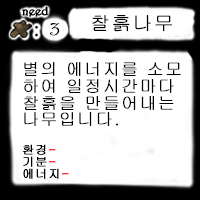
<style>
.page{position:relative;width:200px;height:200px;background:#ffffff}
.page>*{position:absolute;margin:0}
.t1{font:19.4px "Gulim";letter-spacing:0.08em;color:#000000;font-weight:bold}
.t2{font:19.4px "Gulim";letter-spacing:0.08em;color:#060606;font-weight:bold}
.t3{font:19.4px "Harrington";letter-spacing:0.08em;color:#030404;font-weight:bold}
.t4{font:16.8px "Gulim";letter-spacing:0.08em;color:#030404;font-weight:bold}
.t5{font:12px "Gulim";letter-spacing:0.08em;color:#030404;font-weight:bold}
.t6{font:12px "Gulim";letter-spacing:0.08em;color:#ff0000;font-weight:bold}
</style>
<div class="page">
<p class="t1" style="left:92px;top:15px;width:80px;height:17px">찰흙나무</p>
<p class="t2" style="left:35px;top:26px;width:3px;height:11px">:</p>
<p class="t3" style="left:50px;top:23px;width:10px;height:13px">3</p>
<p class="t4" style="left:23px;top:62px;width:158px;height:117px">별의 에너지를 소모<br>하여 일정시간마다 <br>찰흙을 만들어내는<br>나무입니다.<br><br><span class="t5">환경</span><span class="t6">-<br></span><span class="t5">기분</span><span class="t6">-<br></span><span class="t5">에너지</span><span class="t6">-</span></p>
</div>
